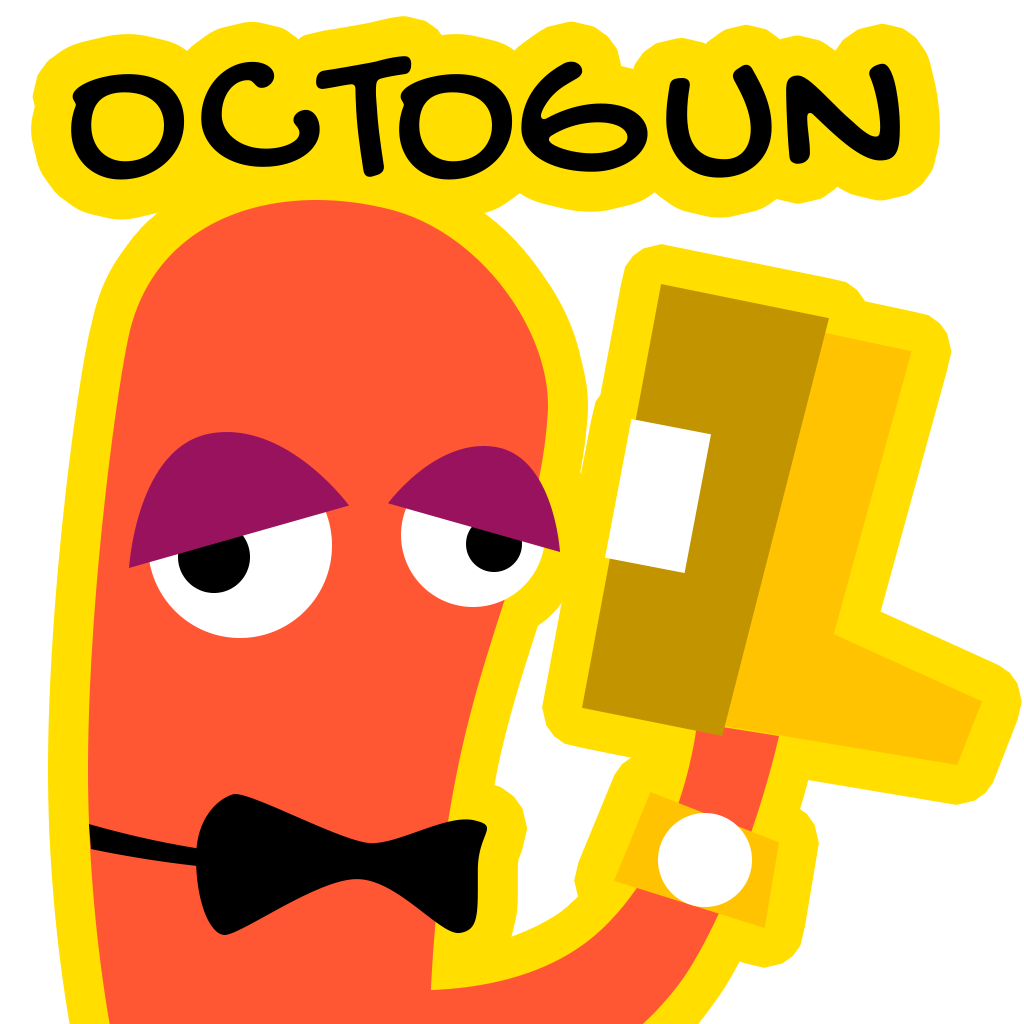
<style>
.page{position:relative;width:1024px;height:1024px;background:#ffffff}
.page>*{position:absolute;margin:0}
.t1{font:204px "GochiHandCyrillic";color:#000000}
</style>
<div class="page">
<p class="t1" style="left:71px;top:56px;width:829px;height:124px">OCTOGUN</p>
</div>
